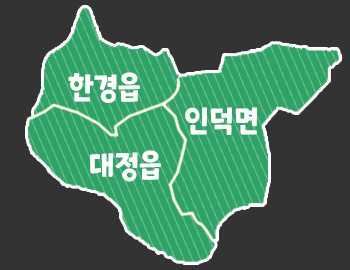
<style>
.page{position:relative;width:350px;height:270px;background:#333333}
.page>*{position:absolute;margin:0}
.t1{font:30.5px "ONEMobilePOPRegular";color:#ffffff;scale:0.93 1}
</style>
<div class="page">
<p class="t1" style="left:68px;top:72px;width:72px;height:31px">한경읍</p>
<p class="t1" style="left:185px;top:107px;width:72px;height:28px">인덕면</p>
<p class="t1" style="left:90px;top:150px;width:71px;height:32px">대정읍</p>
</div>
